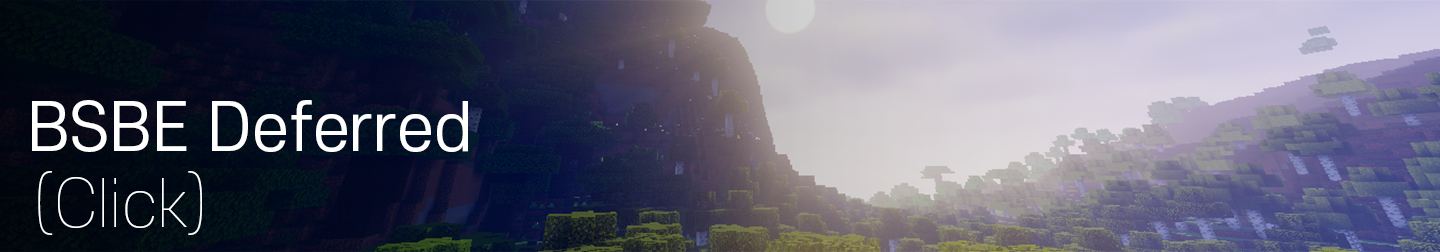
<style>
.page{position:relative;width:1440px;height:252px}
.page>*{position:absolute;margin:0}
.t1{font:64px "S-CoreDream-4Regular";color:#ffffff}
.t2{font:64px "S-CoreDream-1Thin";color:#ffffff}
</style>
<div class="page">
<p class="t1" style="left:32px;top:100px;width:436px;height:52px">BSBE Deferred</p>
<p class="t2" style="left:38px;top:171px;width:164px;height:64px">(Click)</p>
</div>
